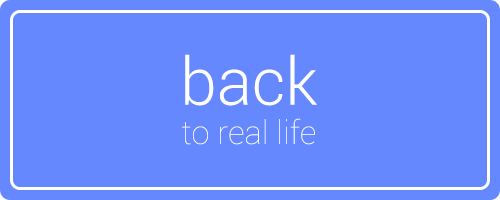
<style>
.page{position:relative;width:500px;height:200px;background:#6688ff}
.page>*{position:absolute;margin:0}
.t1{font:32.7px "Roboto-Thin";color:#ffffff}
.t2{font:65.4px "Roboto-Light";color:#ffffff}
</style>
<div class="page">
<p class="t1" style="left:182px;top:54px;width:135px;height:91px;text-align:center"><span class="t2">back<br></span>to real life</p>
</div>
